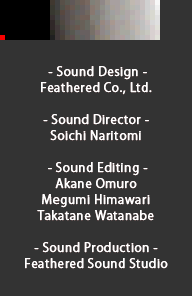
<style>
.page{position:relative;width:192px;height:296px;background:#333333}
.page>*{position:absolute;margin:0}
.t1{font:12px/16px "KozGoPr6N-Regular";letter-spacing:0.025em;color:#ffffff;font-weight:bold}
</style>
<div class="page">
<p class="t1" style="left:25px;top:66px;width:143px;height:203px;text-align:center">- Sound Design -<br>Feathered Co., Ltd.<br> <br>- Sound Director -<br>Soichi Naritomi<br><br> - Sound Editing -<br>Akane Omuro<br>Megumi Himawari<br>Takatane Watanabe<br><br>- Sound Production -<br>Feathered Sound Studio</p>
</div>
